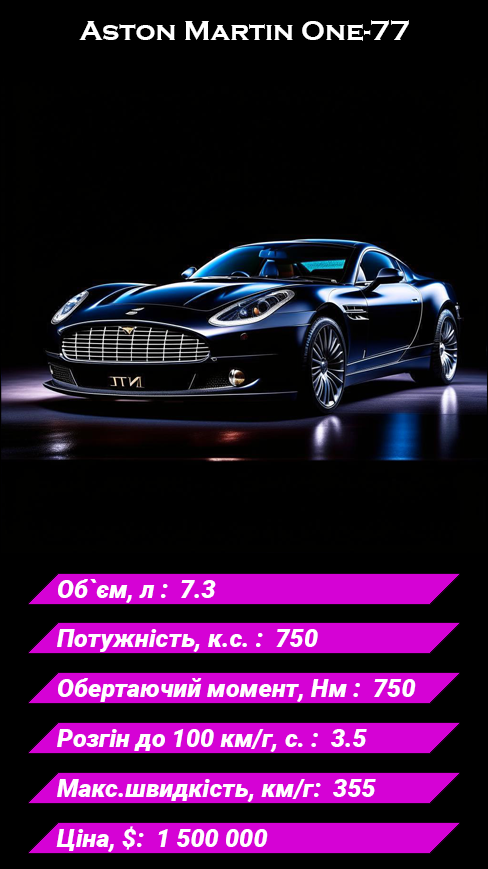
<style>
.page{position:relative;width:488px;height:869px;background:#000000}
.page>*{position:absolute;margin:0}
.t1{font:28px "CopperplateGothic-Bold";color:#ffffff}
.t2{font:25px "Roboto-BlackItalic";color:#ffffff}
</style>
<div class="page">
<p class="t1" style="left:79px;top:20px;width:330px;height:21px">Aston Martin One-77</p>
<p class="t2" style="left:58px;top:579px;width:158px;height:24px">Об`єм, л :  7.3</p>
<p class="t2" style="left:57px;top:629px;width:261px;height:23px">Потужність, к.с. :  750</p>
<p class="t2" style="left:58px;top:678px;width:358px;height:24px">Обертаючий момент, Нм :  750</p>
<p class="t2" style="left:57px;top:729px;width:310px;height:23px">Розгін до 100 км/г, с. :  3.5</p>
<p class="t2" style="left:57px;top:779px;width:319px;height:23px">Макс.швидкість, км/г:  355</p>
<p class="t2" style="left:56px;top:826px;width:212px;height:26px">Ціна, $:  1 500 000</p>
</div>
